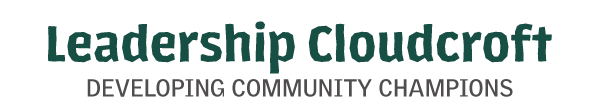
<style>
.page{position:relative;width:600px;height:112px;background:#ffffff}
.page>*{position:absolute;margin:0}
.t1{font:48px "LosLanaNiuPro-Bold";letter-spacing:0.005em;color:#184f44}
.t2{font:24px "GriffithGothic-Bold";letter-spacing:0.005em;color:#504d4d}
</style>
<div class="page">
<p class="t1" style="left:48px;top:21px;width:504px;height:53px">Leadership Cloudcroft</p>
<p class="t2" style="left:87px;top:79px;width:426px;height:18px">DEVELOPING COMMUNITY CHAMPIONS</p>
</div>
